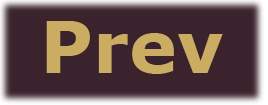
<style>
.page{position:relative;width:268px;height:105px;background:#3a232c}
.page>*{position:absolute;margin:0}
.t1{font:72px "Verdana-Bold";color:#cbac63}
</style>
<div class="page">
<p class="t1" style="left:46px;top:21px;width:177px;height:53px">Prev</p>
</div>
